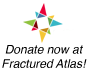
<style>
.page{position:relative;width:88px;height:70px;background:#ffffff}
.page>*{position:absolute;margin:0}
.t1{font:12px "Helvetica-Oblique";color:#000000}
</style>
<div class="page">
<p class="t1" style="left:2px;top:45px;width:85px;height:23px;text-align:center">Donate now at<br>Fractured Atlas!</p>
</div>
